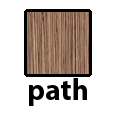
<style>
.page{position:relative;width:116px;height:116px;background:#ffffff}
.page>*{position:absolute;margin:0}
.t1{font:30px "MyriadPro-Bold";color:#000000}
</style>
<div class="page">
<p class="t1" style="left:29px;top:78px;width:58px;height:28px">path</p>
</div>
